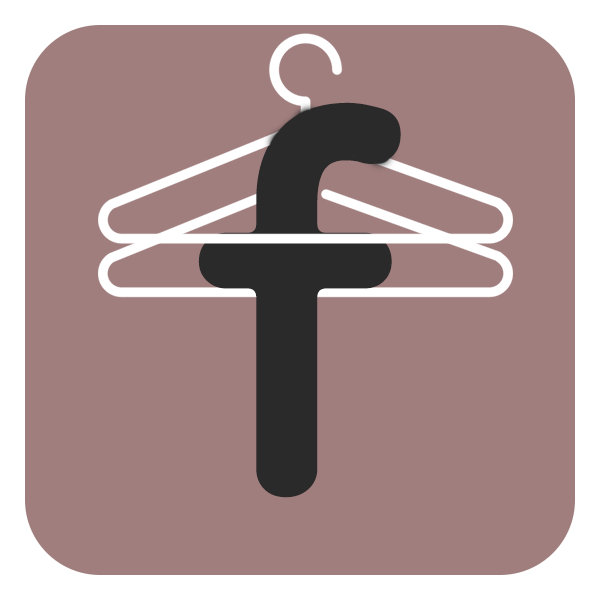
<style>
.page{position:relative;width:600px;height:600px;background:#a17e7e}
.page>*{position:absolute;margin:0}
.t1{font:895.8px "Dongle-Regular";color:#2a2a2a}
</style>
<div class="page">
<p class="t1" style="left:198px;top:102px;width:203px;height:396px">f</p>
</div>
